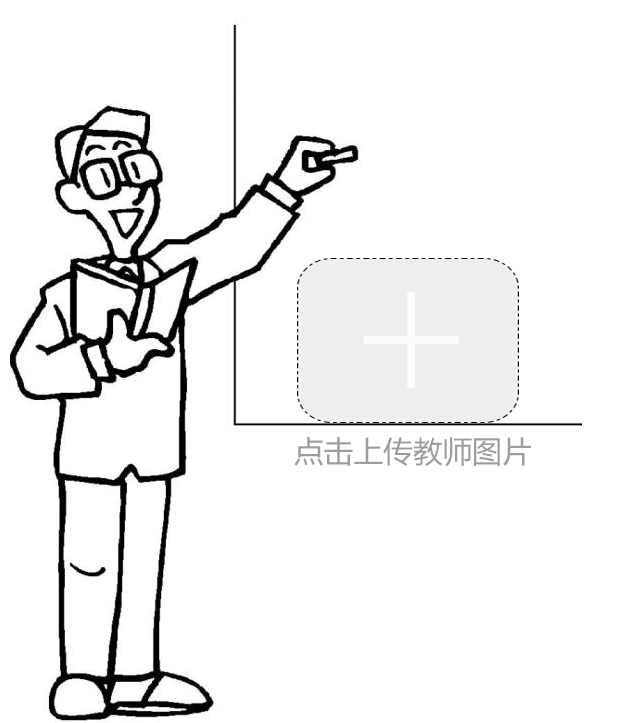
<style>
.page{position:relative;width:638px;height:723px;background:#ffffff}
.page>*{position:absolute;margin:0}
.t1{font:180px "LetterGothicStd";color:#fcfcfc}
.t2{font:30px "MicrosoftYaHei";color:#9d9d9d}
</style>
<div class="page">
<p class="t1" style="left:363px;top:292px;width:96px;height:96px">+</p>
<p class="t2" style="left:294px;top:437px;width:237px;height:30px">点击上传教师图片</p>
</div>
